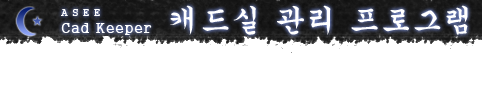
<style>
.page{position:relative;width:482px;height:100px;background:#ffffff}
.page>*{position:absolute;margin:0}
.t1{font:30px "Gungsuh";letter-spacing:0.05em;color:#ffffff}
.t2{font:10px "Gungsuh";letter-spacing:0.05em;color:#ffffff}
.t3{font:14px "Gungsuh";letter-spacing:0.05em;color:#ffffff}
</style>
<div class="page">
<p class="t1" style="left:170px;top:5px;width:298px;height:30px">캐드실 관리 프로그램</p>
<p class="t2" style="left:61px;top:9px;width:39px;height:7px">A S E E</p>
<p class="t3" style="left:61px;top:23px;width:91px;height:12px">Cad Keeper</p>
</div>
